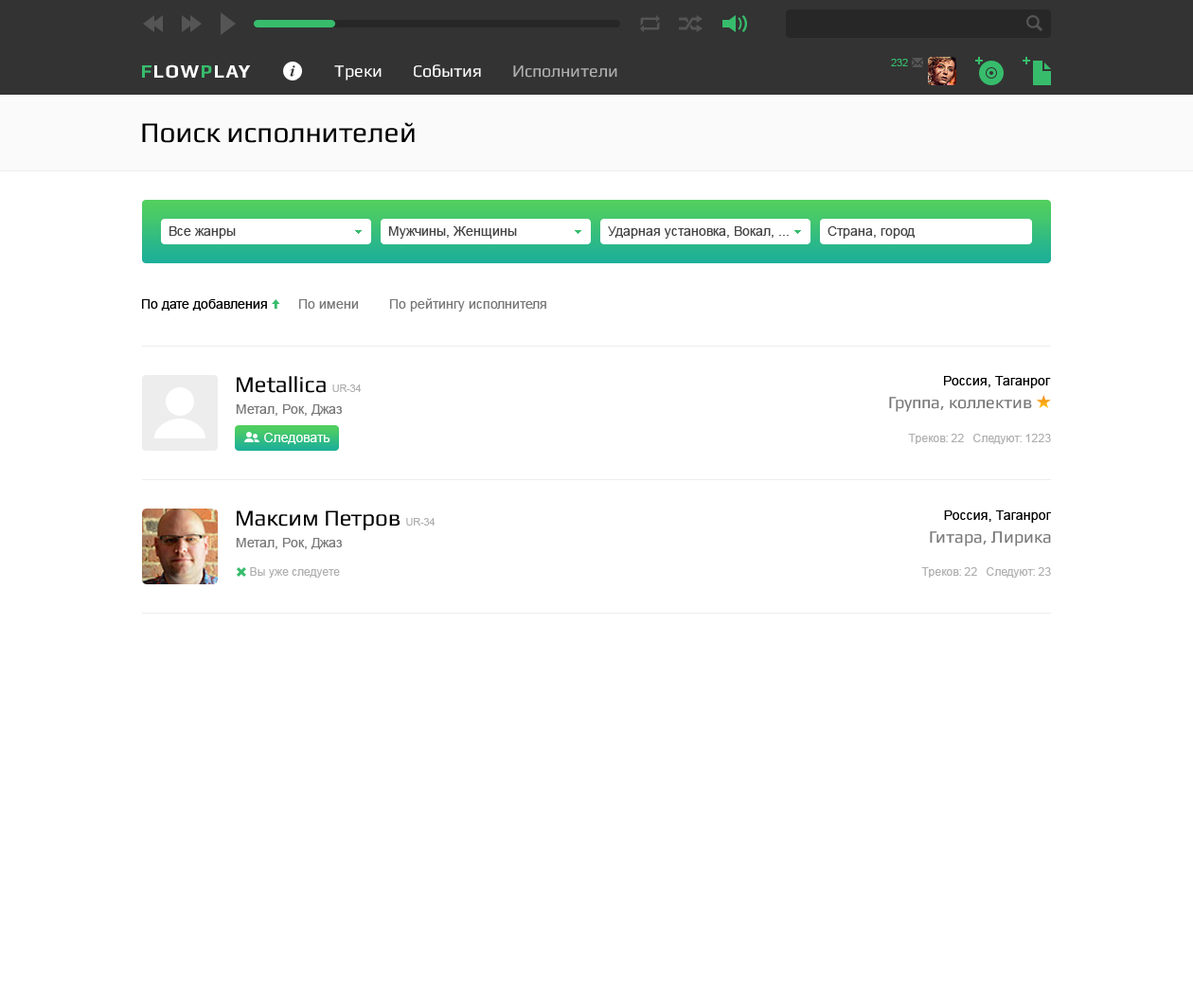
<style>
.page{position:relative;width:1193px;height:1000px;background:#ffffff}
.page>*{position:absolute;margin:0}
.t1{font:28.4px "Play";color:#000000}
.t2{font:13.3px "ArialMT";color:#444444}
.t3{font:13.3px "ArialMT";color:#777777}
.t4{font:13.3px "ArialMT";color:#000000}
.t5{font:22.7px "Play";color:#000000}
.t6{font:10.4px "ArialMT";color:#afafaf}
.t7{font:17px "Play";color:#777777}
.t8{font:13.3px "ArialMT";color:#ffffff}
.t9{font:11.4px "ArialMT";color:#afafaf}
</style>
<div class="page">
<p class="t1" style="left:142px;top:122px;width:273px;height:21px">Поиск исполнителей</p>
<p class="t2" style="left:169px;top:226px;width:67px;height:13px">Все жанры</p>
<p class="t2" style="left:388px;top:226px;width:129px;height:13px">Мужчины, Женщины</p>
<p class="t2" style="left:608px;top:226px;width:181px;height:13px">Ударная установка, Вокал, ...</p>
<p class="t2" style="left:827px;top:226px;width:87px;height:13px">Страна, город</p>
<p class="t3" style="left:142px;top:298px;width:404px;height:13px"><span class="t4">По дате добавления    </span>    По имени        По рейтингу исполнителя</p>
<p class="t5" style="left:237px;top:376px;width:125px;height:17px">Metallica <span class="t6">UR-34</span></p>
<p class="t4" style="left:944px;top:376px;width:107px;height:12px">Россия, Таганрог</p>
<p class="t7" style="left:889px;top:397px;width:143px;height:15px">Группа, коллектив</p>
<p class="t3" style="left:236px;top:404px;width:106px;height:12px">Метал, Рок, Джаз</p>
<p class="t8" style="left:264px;top:433px;width:66px;height:11px">Следовать</p>
<p class="t9" style="left:908px;top:434px;width:143px;height:10px">Треков: 22   Следуют: 1223</p>
<p class="t5" style="left:237px;top:510px;width:198px;height:20px">Максим Петров <span class="t6">UR-34</span></p>
<p class="t4" style="left:944px;top:510px;width:107px;height:13px">Россия, Таганрог</p>
<p class="t7" style="left:930px;top:531px;width:121px;height:15px">Гитара, Лирика</p>
<p class="t3" style="left:236px;top:538px;width:106px;height:11px">Метал, Рок, Джаз</p>
<p class="t9" style="left:250px;top:567px;width:90px;height:10px">Вы уже следуете</p>
<p class="t9" style="left:921px;top:567px;width:130px;height:10px">Треков: 22   Следуют: 23</p>
</div>
